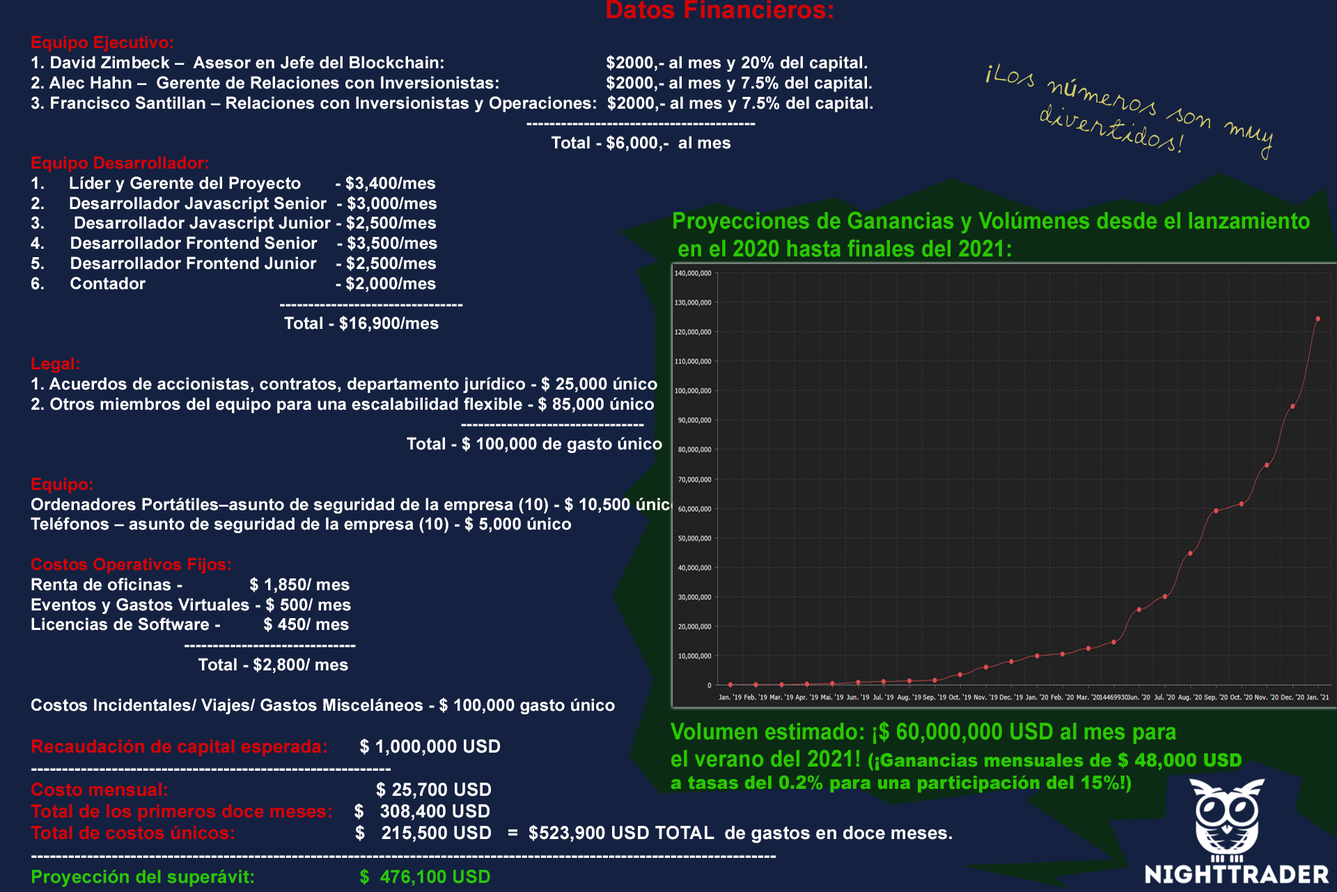
<style>
.page{position:relative;width:1337px;height:892px;background:#142141}
.page>*{position:absolute;margin:0}
.t1{font:25.1px "Arial-BoldMT";letter-spacing:0.01em;color:#d70202}
.t2{font:16.7px "Arial-BoldMT";letter-spacing:0.01em;color:#ffffff}
.t3{font:16.7px "Arial-BoldMT";letter-spacing:0.01em;color:#d70202}
.t4{font:18.1px "Arial-BoldMT";letter-spacing:0.01em;color:#d70202}
.t5{font:18.1px "Arial-BoldMT";letter-spacing:0.01em;color:#ffffff}
.t6{font:18.1px "Arial-BoldMT";letter-spacing:0.01em;color:#2ac700}
.t7{font:25.3px "Aljo";letter-spacing:0.01em;color:#cfc968}
.t8{font:25.3px "MyriadPro-Regular";letter-spacing:0.01em;color:#cfc968}
.t9{font:23px "Arial-BoldMT";letter-spacing:0.01em;color:#2ac700;scale:0.91 1}
.t10{font:18.4px "Arial-Black";letter-spacing:0.01em;color:#2ac700;scale:0.91 1}
</style>
<div class="page">
<p class="t1" style="left:607px;top:0px;width:226px;height:19px">Datos Financieros:</p>
<p class="t2" style="left:31px;top:36px;width:921px;height:851px"><span class="t3">Equipo Ejecutivo:<br></span>1. David Zimbeck –  Asesor en Jefe del Blockchain:             $2000,- al mes y 20% del capital. <br>2. Alec Hahn –  Gerente de Relaciones con Inversionistas:            $2000,- al mes y 7.5% del capital. <br>3. Francisco Santillan – Relaciones con Inversionistas y Operaciones:  $2000,- al mes y 7.5% del capital. <br>                       ----------------------------------------<br>                        Total - $6,000,-  al mes<br><span class="t3">Equipo Desarrollador:<br></span>1.     Líder y Gerente del Proyecto       - $3,400/mes<br>2.     Desarrollador Javascript Senior  - $3,000/mes<br>3.      Desarrollador Javascript Junior - $2,500/mes<br>4.    Desarrollador Frontend Senior    - $3,500/mes<br>5.    Desarrollador Frontend Junior    - $2,500/mes<br>6.     Contador              - $2,000/mes<br>                  --------------------------------<br>                   Total - $16,900/mes<br><br><span class="t3">Legal:<br></span>1. Acuerdos de accionistas, contratos, departamento jurídico - $ 25,000 único<br>2. Otros miembros del equipo para una escalabilidad flexible - $ 85,000 único<br>                        --------------------------------<br>               Total - $ 100,000 de gasto único <br><br><span class="t3">Equipo:<br></span>Ordenadores Portátiles–asunto de seguridad de la empresa (10) - $ 10,500 único<br>Teléfonos – asunto de seguridad de la empresa (10) - $ 5,000 único<br><br><span class="t3">Costos Operativos Fijos:<br></span>Renta de oficinas -              $ 1,850/ mes<br>Eventos y Gastos Virtuales - $ 500/ mes<br>Licencias de Software -         $ 450/ mes<br>               ------------------------------<br>                  Total - $2,800/ mes<br><br>Costos Incidentales/ Viajes/ Gastos Misceláneos - $ 100,000 gasto único<br><br><span class="t4">Recaudación de capital esperada: </span><span class="t5">     $ 1,000,000 USD<br>----------------------------------------------------------<br></span><span class="t4">Costo mensual: </span><span class="t5">                           $ 25,700 USD<br></span><span class="t4">Total de los primeros doce meses:  </span><span class="t5">  $   308,400 USD<br></span><span class="t4">Total de costos únicos:</span><span class="t5">                    $   215,500 USD   =  $523,900 USD TOTAL  de gastos en doce meses. <br>------------------------------------------------------------------------------------------------------------------------<br></span><span class="t6">Proyección del superávit:                  $  476,100 USD</span></p>
<p class="t7" style="left:986px;top:63px;width:287px;height:97px;rotate:13deg"><span class="t8">¡</span>Los n<span class="t8">ú</span>meros son muy<br>     divertidos!</p>
<p class="t9" style="left:674px;top:211px;width:636px;height:46px">Proyecciones de Ganancias y Volúmenes desde el lanzamiento<br> en el 2020 hasta finales del 2021:</p>
<p class="t10" style="left:671px;top:721px;width:571px;height:72px"><span class="t9">Volumen estimado: ¡$ 60,000,000 USD al mes para <br>el verano del 2021! </span>(¡Ganancias mensuales de $ 48,000 USD<br>a tasas del 0.2% para una participación del 15%!)</p>
</div>
